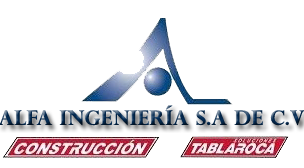
<style>
.page{position:relative;width:304px;height:168px;background:#ffffff}
.page>*{position:absolute;margin:0}
.t1{font:20px "PerpetuaTitlingMT-Bold";letter-spacing:0.01em}
</style>
<div class="page">
<p class="t1" style="left:0px;top:105px;width:305px;height:21px">ALFA INGENIERÍA S.A DE C.V</p>
</div>
